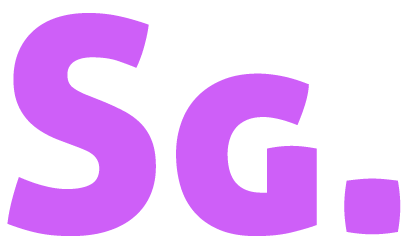
<style>
.page{position:relative;width:417px;height:250px;background:#ffffff}
.page>*{position:absolute;margin:0}
.t1{font:300px "AllerDisplay";color:#ce5ff8}
</style>
<div class="page">
<p class="t1" style="left:7px;top:13px;width:394px;height:223px">Sg.</p>
</div>
